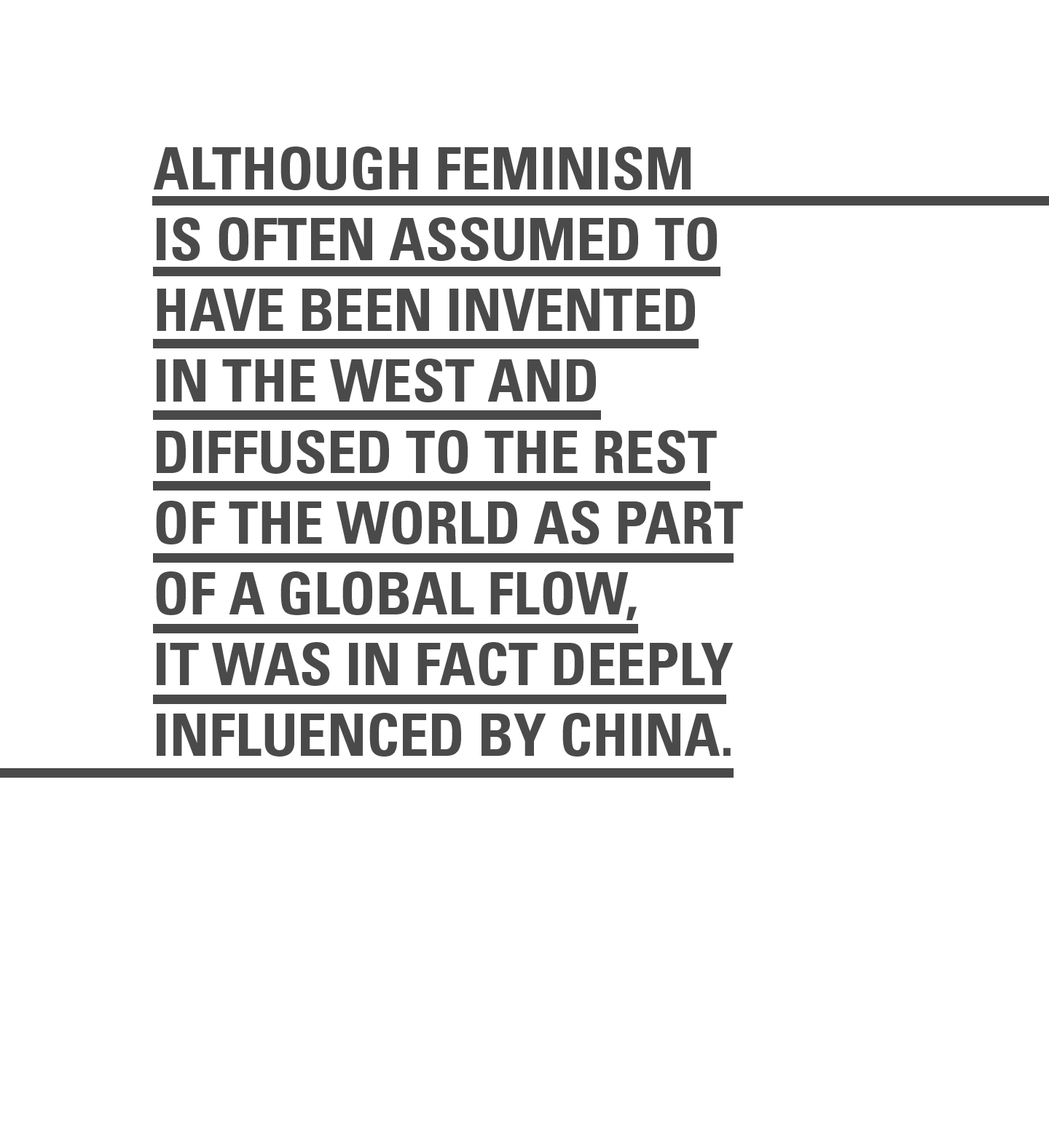
<style>
.page{position:relative;width:1049px;height:1137px;background:#ffffff}
.page>*{position:absolute;margin:0}
.t1{font:59px "Univers-CondensedBold";color:#4a4a4a}
</style>
<div class="page">
<p class="t1" style="left:153px;top:146px;width:590px;height:610px">ALTHOUGH FEMINISM <br>IS OFTEN ASSUMED TO HAVE BEEN INVENTED <br>IN THE WEST AND DIFFUSED TO THE REST OF THE WORLD AS PART OF A GLOBAL FLOW, <br>IT WAS IN FACT DEEPLY INFLUENCED BY CHINA.</p>
</div>
